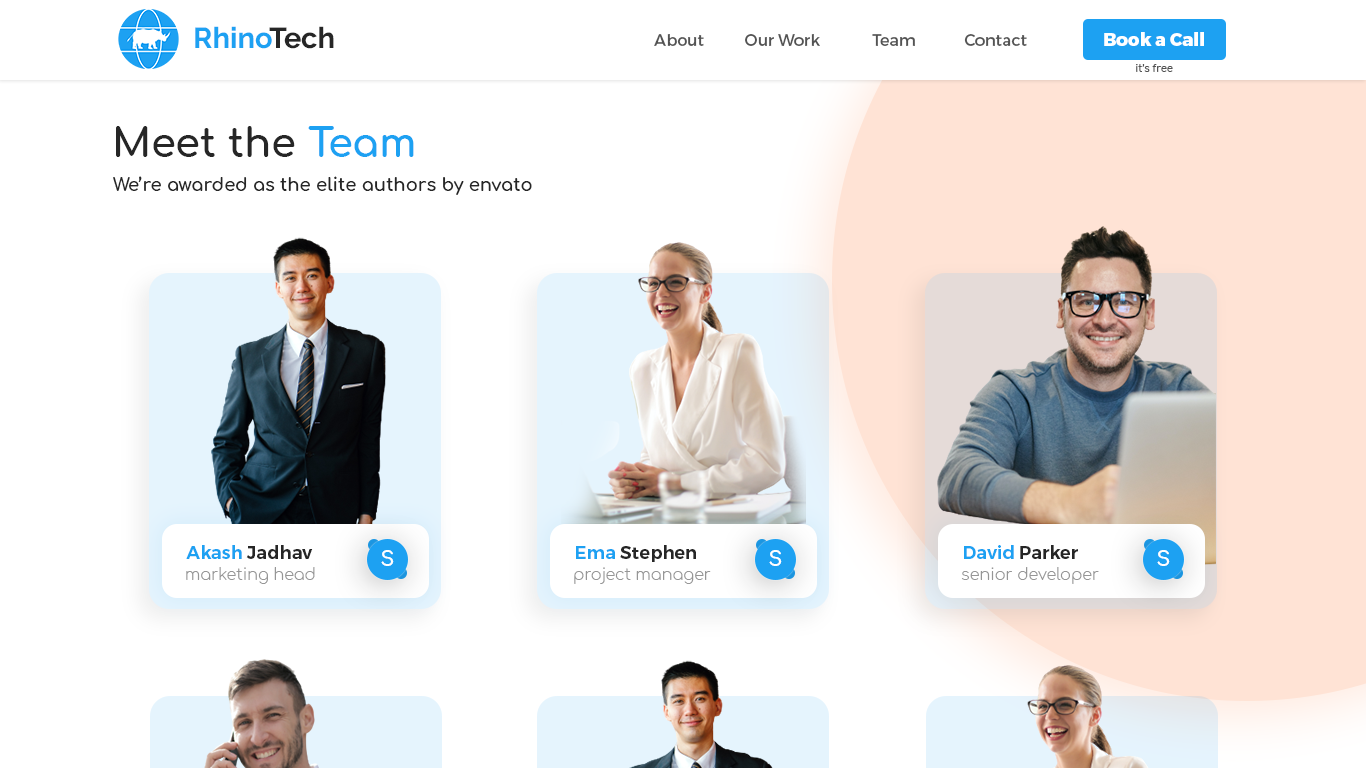
<style>
.page{position:relative;width:1366px;height:768px;background:#ffffff}
.page>*{position:absolute;margin:0}
.t1{font:29px "Raleway-Bold";color:#1da1f2}
.t2{font:29px "Raleway-Bold";color:#262626}
.t3{font:16px "Montserrat-Regular";color:#535353}
.t4{font:18px "Montserrat-ExtraBold";color:#ffffff}
.t5{font:10px "Comfortaa-Bold";color:#535353}
.t6{font:40px "Comfortaa-Bold";color:#262626}
.t7{font:40px "Comfortaa-Bold";color:#1da1f2}
.t8{font:18px "Comfortaa-Bold";color:#262626}
.t9{font:18px "Montserrat-SemiBold";color:#262626}
.t10{font:18px "Montserrat-SemiBold";color:#1da1f2}
.t11{font:20px "Comfortaa-Bold";color:#ffffff}
.t12{font:16px "Comfortaa-Light";color:#969696}
</style>
<div class="page">
<p class="t1" style="left:195px;top:26px;width:139px;height:23px">Rhino<span class="t2">Tech</span></p>
<p class="t3" style="left:654px;top:34px;width:50px;height:12px">About</p>
<p class="t3" style="left:745px;top:34px;width:75px;height:12px">Our Work</p>
<p class="t3" style="left:872px;top:34px;width:43px;height:12px">Team</p>
<p class="t3" style="left:964px;top:34px;width:63px;height:12px">Contact</p>
<p class="t4" style="left:1104px;top:32px;width:100px;height:14px">Book a Call</p>
<p class="t5" style="left:1136px;top:64px;width:37px;height:8px">it’s free</p>
<p class="t6" style="left:116px;top:126px;width:298px;height:31px">Meet the <span class="t7">Team</span></p>
<p class="t8" style="left:113px;top:176px;width:419px;height:19px">We’re awarded as the elite authors by envato</p>
<p class="t9" style="left:186px;top:545px;width:127px;height:14px"><span class="t10">Akash</span> Jadhav</p>
<p class="t9" style="left:576px;top:545px;width:120px;height:17px"><span class="t10">Ema </span>Stephen</p>
<p class="t9" style="left:964px;top:545px;width:114px;height:14px"><span class="t10">David</span> Parker</p>
<p class="t11" style="left:381px;top:550px;width:13px;height:16px">S</p>
<p class="t11" style="left:769px;top:550px;width:13px;height:16px">S</p>
<p class="t11" style="left:1157px;top:550px;width:13px;height:16px">S</p>
<p class="t12" style="left:186px;top:567px;width:129px;height:17px">marketing head</p>
<p class="t12" style="left:574px;top:567px;width:137px;height:17px">project manager</p>
<p class="t12" style="left:961px;top:567px;width:138px;height:17px">senior developer</p>
</div>
